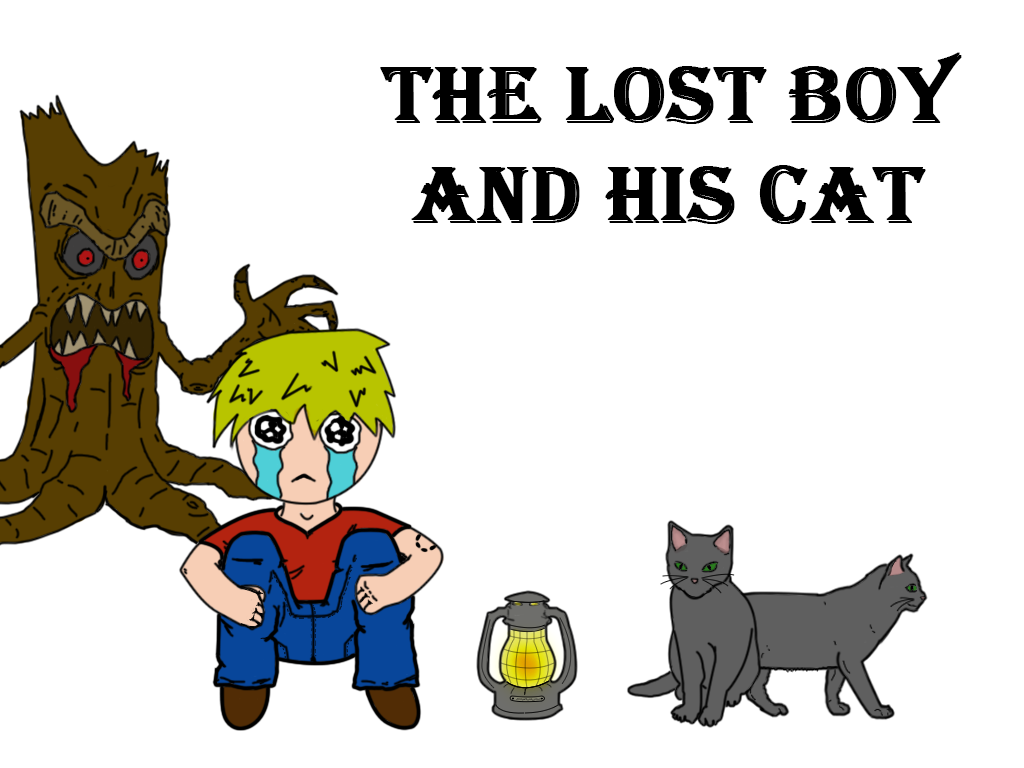
<style>
.page{position:relative;width:1024px;height:768px;background:#ffffff}
.page>*{position:absolute;margin:0}
.t1{font:83.3px "Algerian";color:#000000;font-weight:bold}
</style>
<div class="page">
<p class="t1" style="left:380px;top:52px;width:582px;height:172px;text-align:center">THE LOST BOY<br>and his cat</p>
</div>
